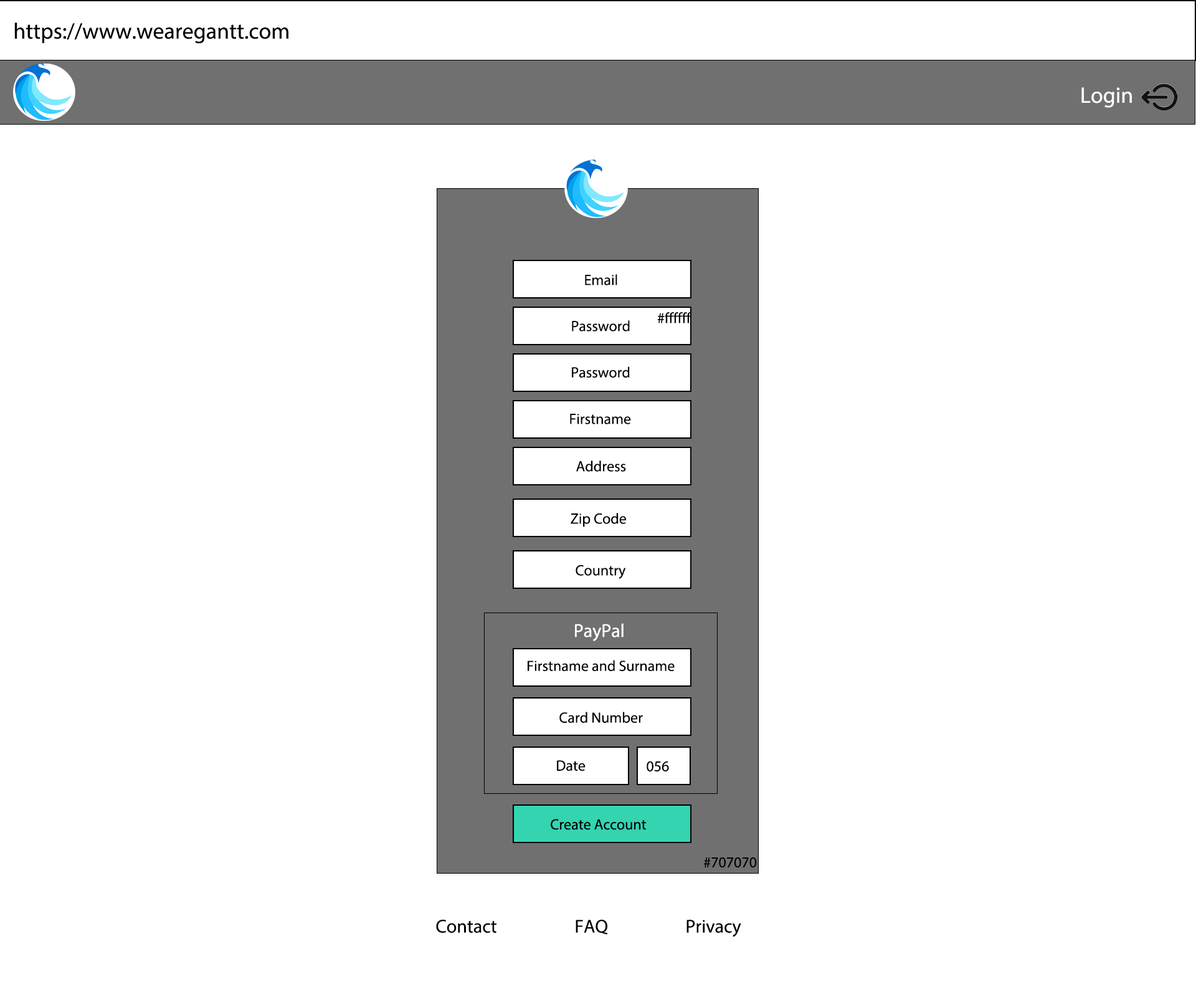
<style>
.page{position:relative;width:1196px;height:997px;background:#ffffff}
.page>*{position:absolute;margin:0}
.t1{font:22.4px "MyriadPro-Regular";color:#000000}
.t2{font:22.4px "MyriadPro-Regular";color:#ffffff}
.t3{font:15px "MyriadPro-Regular";color:#000000}
.t4{font:18.7px "MyriadPro-Regular";color:#ffffff}
.t5{font:18.7px "MyriadPro-Regular";color:#000000}
</style>
<div class="page">
<p class="t1" style="left:14px;top:22px;width:274px;height:22px">https://www.wearegantt.com</p>
<p class="t2" style="left:1082px;top:87px;width:50px;height:21px">Login</p>
<p class="t3" style="left:585px;top:274px;width:32px;height:11px">Email</p>
<p class="t3" style="left:657px;top:312px;width:35px;height:11px">#ffffff</p>
<p class="t3" style="left:572px;top:320px;width:58px;height:11px">Password</p>
<p class="t3" style="left:572px;top:366px;width:58px;height:12px">Password</p>
<p class="t3" style="left:570px;top:414px;width:61px;height:10px">Firstname</p>
<p class="t3" style="left:576px;top:460px;width:50px;height:12px">Address</p>
<p class="t3" style="left:571px;top:513px;width:55px;height:14px">Zip Code</p>
<p class="t3" style="left:576px;top:564px;width:50px;height:15px">Country</p>
<p class="t4" style="left:575px;top:623px;width:49px;height:18px">PayPal</p>
<p class="t3" style="left:528px;top:660px;width:147px;height:11px">Firstname and Surname</p>
<p class="t3" style="left:559px;top:711px;width:84px;height:12px">Card Number</p>
<p class="t3" style="left:557px;top:760px;width:29px;height:11px">Date</p>
<p class="t3" style="left:647px;top:761px;width:22px;height:10px">056</p>
<p class="t3" style="left:551px;top:819px;width:96px;height:11px">Create Account</p>
<p class="t3" style="left:704px;top:857px;width:53px;height:11px">#707070</p>
<p class="t5" style="left:436px;top:920px;width:61px;height:13px">Contact</p>
<p class="t5" style="left:576px;top:920px;width:32px;height:15px">FAQ</p>
<p class="t5" style="left:687px;top:920px;width:54px;height:17px">Privacy</p>
</div>
